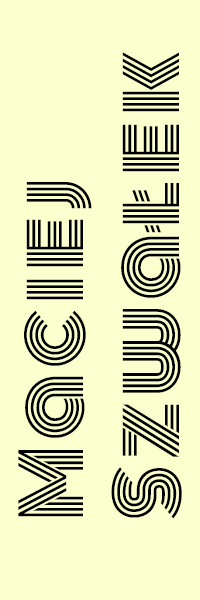
<style>
.page{position:relative;width:200px;height:600px;background:#fbffcd}
.page>*{position:absolute;margin:0}
.t1{font:80px "Monoton-Regular";letter-spacing:0.075em;color:#000000}
</style>
<div class="page">
<p class="t1" style="left:18px;top:52px;width:164px;height:467px;rotate:-90deg">Maciej<br>Szwałek</p>
</div>
